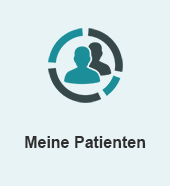
<style>
.page{position:relative;width:170px;height:186px;background:#e8f3f5}
.page>*{position:absolute;margin:0}
.t1{font:16px "Arial-BoldMT";color:#2f2f2f}
</style>
<div class="page">
<p class="t1" style="left:25px;top:136px;width:121px;height:12px">Meine Patienten</p>
</div>
